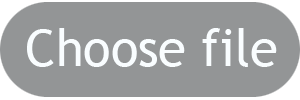
<style>
.page{position:relative;width:300px;height:100px;background:#939596}
.page>*{position:absolute;margin:0}
.t1{font:50.8px "TrebuchetMS";color:#f9fdff}
</style>
<div class="page">
<p class="t1" style="left:27px;top:28px;width:250px;height:39px">Choose file</p>
</div>
